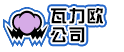
<style>
.page{position:relative;width:124px;height:52px;background:#ffffff}
.page>*{position:absolute;margin:0}
.t1{font:17.3px/18.7px "DFZongYiW7JF";letter-spacing:0.05em;color:#000000}
</style>
<div class="page">
<p class="t1" style="left:50px;top:8px;width:53px;height:35px">瓦力欧<br>公司</p>
</div>
